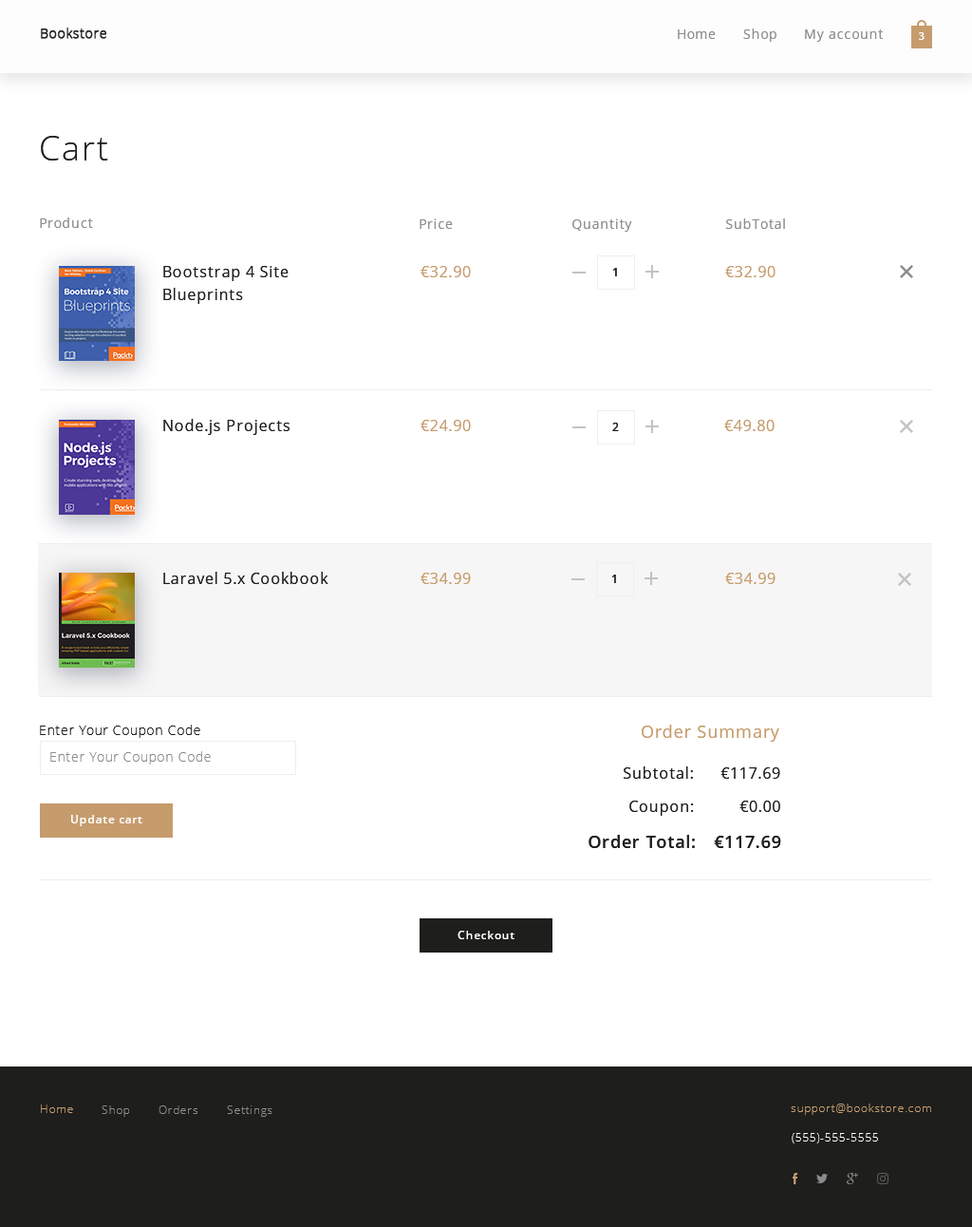
<style>
.page{position:relative;width:972px;height:1227px;background:#ffffff}
.page>*{position:absolute;margin:0}
.t1{font:34.2px "OpenSans-Light";letter-spacing:0.05em;color:#1e1e1c}
.t2{font:13.3px "OpenSans";letter-spacing:0.05em;color:#8c8c8c}
.t3{font:15.2px/22.8px "OpenSans";letter-spacing:0.05em;color:#1e1e1c}
.t4{font:15.2px "OpenSans";letter-spacing:0.05em;color:#c69c6d}
.t5{font:11.4px "OpenSans-Semibold";letter-spacing:0.05em;color:#1e1e1c}
.t6{font:15.2px "OpenSans";letter-spacing:0.05em;color:#1e1e1c}
.t7{font:13.3px "OpenSans-Light";letter-spacing:0.05em;color:#1e1e1c}
.t8{font:17.1px "OpenSans";letter-spacing:0.05em;color:#c69c6d}
.t9{font:13.3px "OpenSans-Light";letter-spacing:0.05em;color:#8c8c8c}
.t10{font:11.4px "OpenSans-Semibold";letter-spacing:0.05em;color:#fffefe}
.t11{font:17.1px "OpenSans-Semibold";letter-spacing:0.05em;color:#1e1e1c}
</style>
<div class="page">
<p class="t1" style="left:41px;top:136px;width:67px;height:24px">Cart</p>
<p class="t2" style="left:40px;top:217px;width:53px;height:11px">Product</p>
<p class="t2" style="left:420px;top:218px;width:33px;height:11px">Price</p>
<p class="t2" style="left:572px;top:218px;width:60px;height:14px">Quantity</p>
<p class="t2" style="left:726px;top:218px;width:59px;height:11px">SubTotal</p>
<p class="t3" style="left:163px;top:266px;width:126px;height:38px">Bootstrap 4 Site Blueprints</p>
<p class="t4" style="left:421px;top:266px;width:50px;height:11px">€32.90</p>
<p class="t5" style="left:613px;top:268px;width:4px;height:8px">1</p>
<p class="t4" style="left:725px;top:266px;width:51px;height:11px">€32.90</p>
<p class="t6" style="left:163px;top:419px;width:127px;height:16px">Node.js Projects</p>
<p class="t4" style="left:421px;top:420px;width:50px;height:11px">€24.90</p>
<p class="t5" style="left:612px;top:422px;width:7px;height:9px">2</p>
<p class="t4" style="left:724px;top:420px;width:51px;height:11px">€49.80</p>
<p class="t6" style="left:163px;top:572px;width:165px;height:12px">Laravel 5.x Cookbook</p>
<p class="t4" style="left:421px;top:572px;width:50px;height:12px">€34.99</p>
<p class="t5" style="left:612px;top:574px;width:4px;height:9px">1</p>
<p class="t4" style="left:725px;top:572px;width:51px;height:12px">€34.99</p>
<p class="t7" style="left:40px;top:724px;width:160px;height:14px">Enter Your Coupon Code</p>
<p class="t8" style="left:642px;top:724px;width:137px;height:17px">Order Summary</p>
<p class="t9" style="left:50px;top:751px;width:161px;height:13px">Enter Your Coupon Code</p>
<p class="t6" style="left:624px;top:766px;width:69px;height:12px">Subtotal:</p>
<p class="t6" style="left:721px;top:767px;width:59px;height:11px">€117.69</p>
<p class="t6" style="left:629px;top:800px;width:64px;height:16px">Coupon:</p>
<p class="t6" style="left:740px;top:800px;width:40px;height:12px">€0.00</p>
<p class="t10" style="left:71px;top:815px;width:71px;height:11px">Update cart</p>
<p class="t11" style="left:589px;top:834px;width:106px;height:14px">Order Total:</p>
<p class="t11" style="left:714px;top:835px;width:67px;height:13px">€117.69</p>
<p class="t10" style="left:458px;top:930px;width:57px;height:9px">Checkout</p>
</div>
